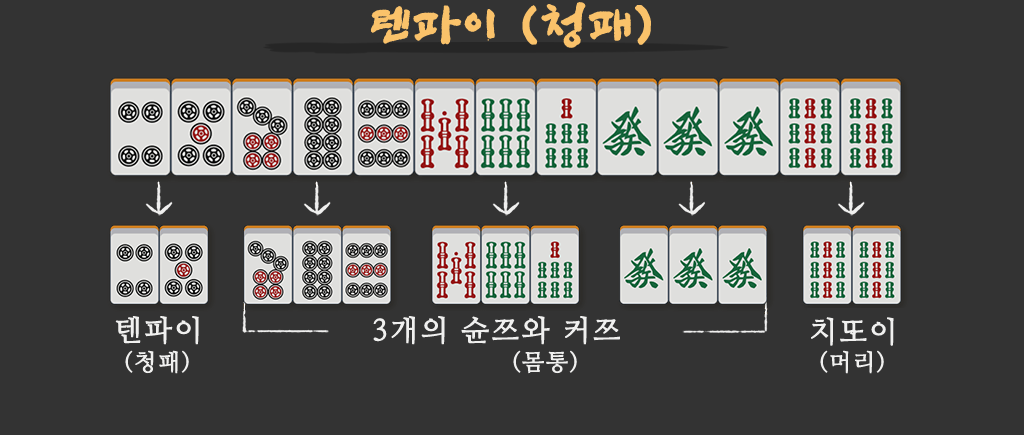
<style>
.page{position:relative;width:1024px;height:435px;background:#333333}
.page>*{position:absolute;margin:0}
.t1{font:48px "SangSangRockOTF";letter-spacing:0.06em;color:#fac26a;font-weight:bold}
.t2{font:29px "NanumMyeongjo";letter-spacing:0.06em;color:#f0f0ef;font-weight:bold}
.t3{font:23px "NanumMyeongjo";letter-spacing:0.06em;color:#f0f0ef;font-weight:bold}
</style>
<div class="page">
<p class="t1" style="left:370px;top:2px;width:281px;height:46px">텐파이 (청패)</p>
<p class="t2" style="left:115px;top:316px;width:84px;height:29px">텐파이</p>
<p class="t2" style="left:373px;top:316px;width:247px;height:29px">3개의 슌쯔와 커쯔</p>
<p class="t2" style="left:811px;top:317px;width:83px;height:29px">치또이</p>
<p class="t3" style="left:125px;top:350px;width:64px;height:24px">(청패)</p>
<p class="t3" style="left:513px;top:350px;width:64px;height:24px">(몸통)</p>
<p class="t3" style="left:820px;top:350px;width:64px;height:24px">(머리)</p>
</div>
